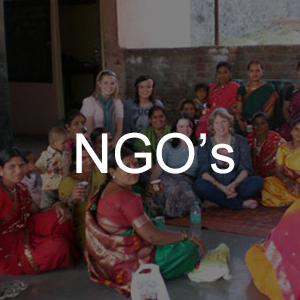
<style>
.page{position:relative;width:300px;height:300px}
.page>*{position:absolute;margin:0}
.t1{font:55px "ArialMT";color:#ffffff}
</style>
<div class="page">
<p class="t1" style="left:76px;top:132px;width:159px;height:42px">NGO’s</p>
</div>
